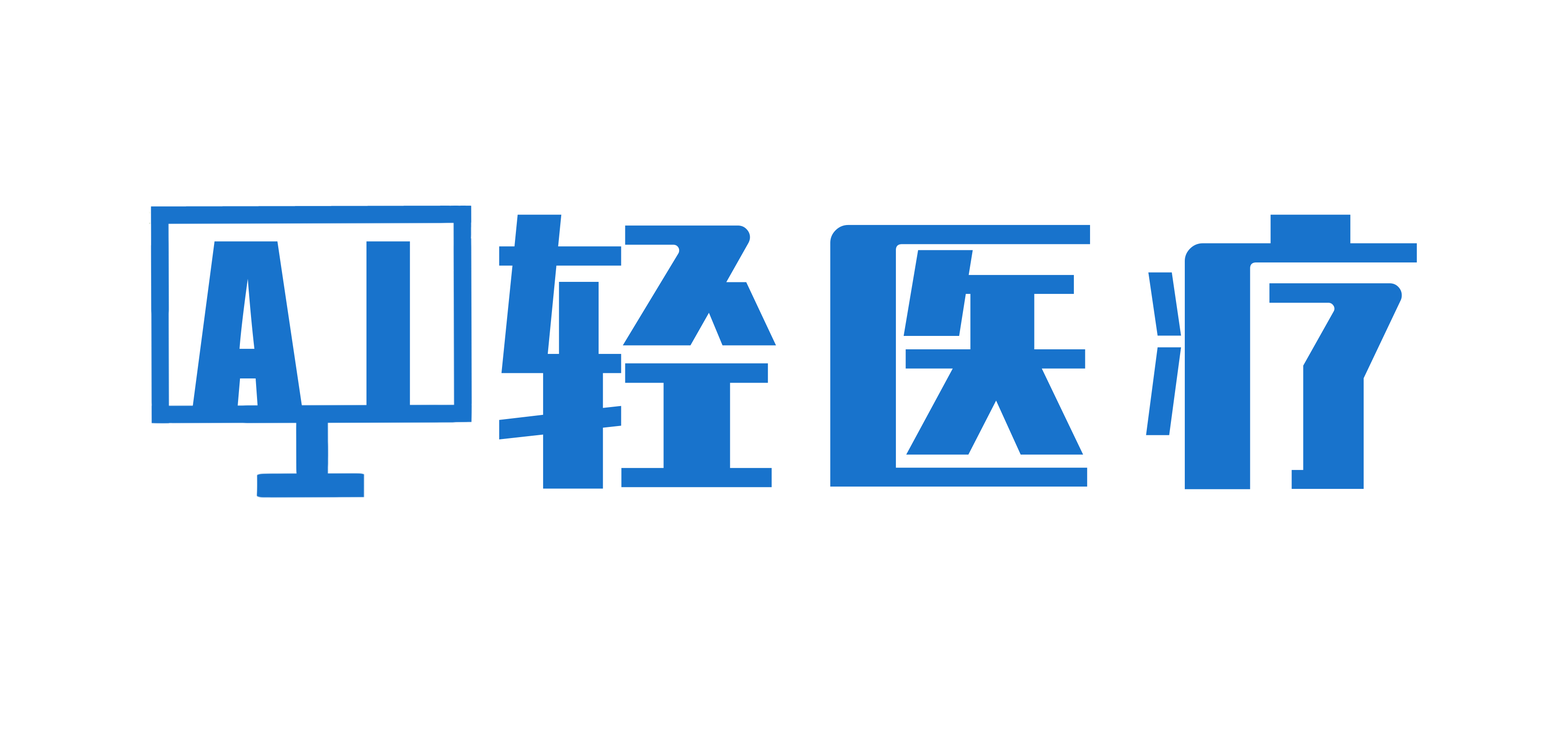
<style>
.page{position:relative;width:1568px;height:749px;background:#ffffff}
.page>*{position:absolute;margin:0}
.t1{font:286px "ZhenyanGB-Regular";letter-spacing:0.12em;color:#1873cc}
</style>
<div class="page">
<p class="t1" style="left:499px;top:214px;width:918px;height:276px">轻医疗</p>
</div>
